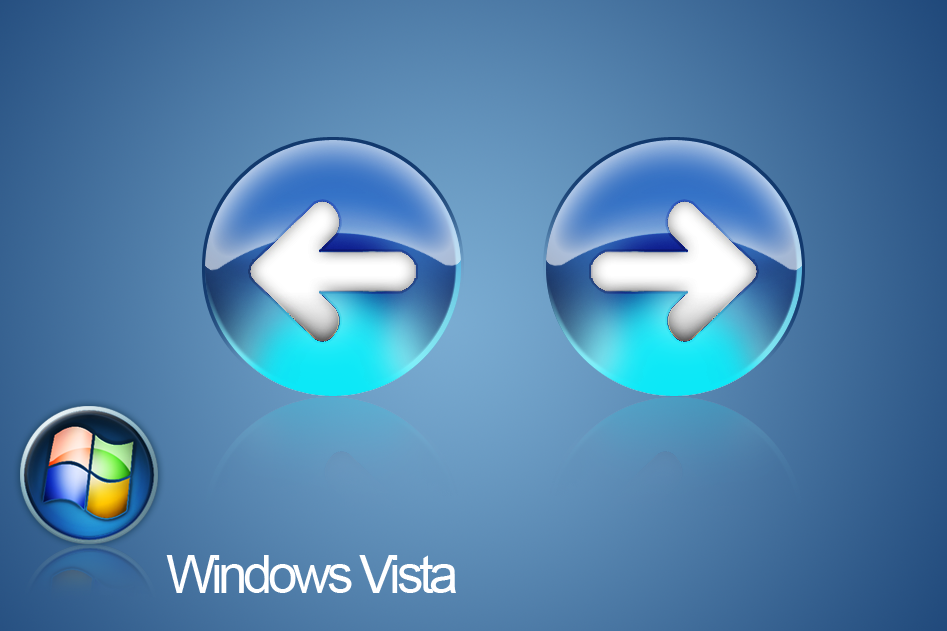
<style>
.page{position:relative;width:947px;height:631px}
.page>*{position:absolute;margin:0}
.t1{font:52.5px "ArialMT";letter-spacing:-0.08em;color:#ffffff}
</style>
<div class="page">
<p class="t1" style="left:166px;top:555px;width:290px;height:38px">Windows Vista</p>
</div>
